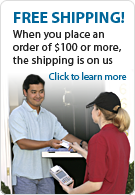
<style>
.page{position:relative;width:135px;height:195px;background:#ffffff}
.page>*{position:absolute;margin:0}
.t1{font:11px "Myriad-Roman";letter-spacing:0.025em;color:#222222}
.t2{font:16px "Myriad-Bold";color:#006699}
.t3{font:11px/15px "Myriad-Roman";letter-spacing:0.025em;color:#222222}
.t4{font:10px "Myriad-Roman";color:#006699}
</style>
<div class="page">
<p class="t1" style="left:13px;top:12px;width:112px;height:54px"><span class="t2">FREE SHIPPING!<br></span><span class="t3">W</span>hen you place an<br>order of $100 or more, <br>the shipping is on us</p>
<p class="t4" style="left:49px;top:72px;width:78px;height:8px">Click to learn more</p>
</div>
